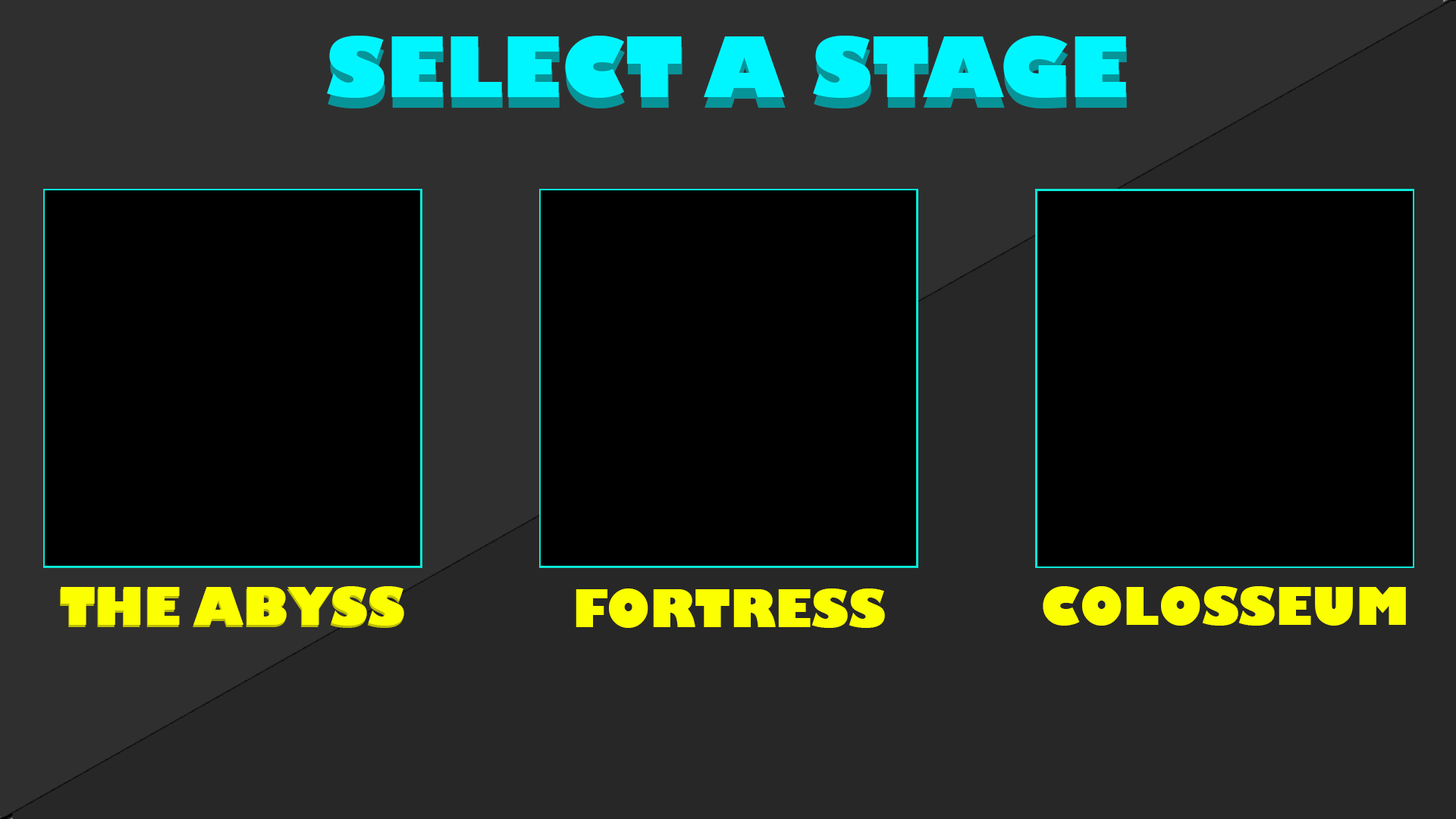
<style>
.page{position:relative;width:1456px;height:819px;background:#000000}
.page>*{position:absolute;margin:0}
.t1{font:82.2px "GillSans-UltraBold";color:#00f6ff}
.t2{font:82.2px "GillSans-UltraBold"}
.t3{font:50.6px "GillSans-UltraBold";color:#fcff00}
</style>
<div class="page">
<p class="t1" style="left:327px;top:36px;width:799px;height:62px">SELECT A STAGE</p>
<p class="t2" style="left:328px;top:46px;width:799px;height:62px">SELECT A STAGE</p>
<p class="t3" style="left:60px;top:588px;width:343px;height:40px">THE ABYSS</p>
<p class="t3" style="left:61px;top:586px;width:343px;height:40px">THE ABYSS</p>
<p class="t3" style="left:576px;top:588px;width:309px;height:40px">FORTRESS</p>
<p class="t3" style="left:1043px;top:586px;width:363px;height:40px">COLOSSEUM</p>
</div>
